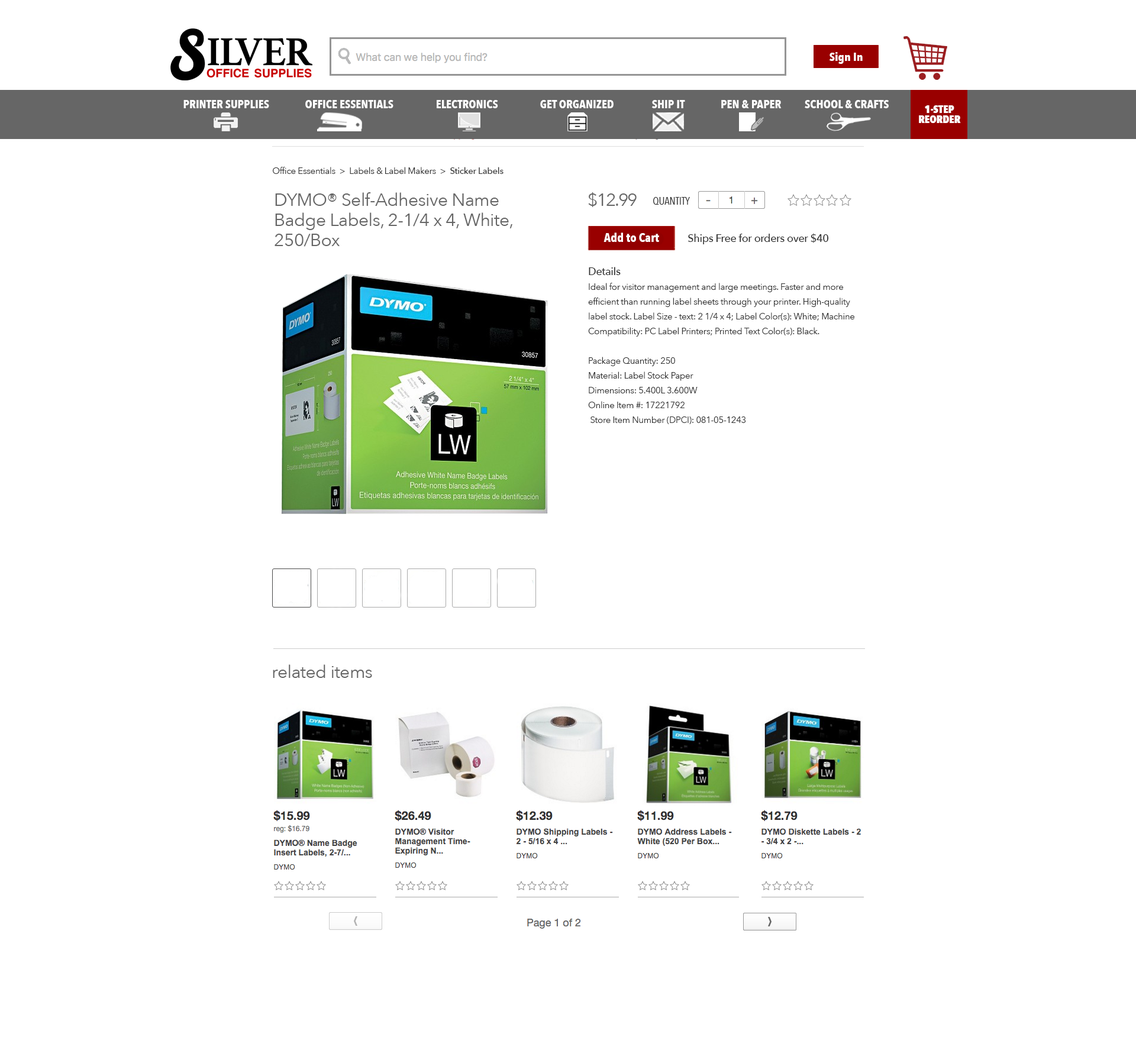
<style>
.page{position:relative;width:1136px;height:1050px;background:#ffffff}
.page>*{position:absolute;margin:0}
.t1{font:11.8px "AvenirNextCondensed-Bold";color:#ffffff}
.t2{font:10.6px/10.1px "AvenirNextCondensed-Heavy";color:#ffffff}
.t3{font:8.9px "AvenirNext-Regular";letter-spacing:-0.02em;color:#333333}
.t4{font:8.9px "AvenirNext-Medium";letter-spacing:-0.02em;color:#333333}
.t5{font:17.7px/20.1px "AvenirNext-Regular";letter-spacing:-0.02em;color:#666666}
.t6{font:17.7px "AvenirNext-Regular";letter-spacing:-0.06em;color:#666666}
.t7{font:17.7px "AvenirNext-Regular";letter-spacing:-0.08em;color:#666666}
.t8{font:17.7px "AvenirNext-Regular";letter-spacing:-0.02em;color:#666666}
.t9{font:10.6px "AvenirNextCondensed-Regular";color:#333333}
.t10{font:12.5px "AvenirNextCondensed-Bold";color:#ffffff}
.t11{font:10.6px "AvenirNext-Medium";letter-spacing:-0.02em;color:#333333}
.t12{font:8.9px/14.8px "AvenirNext-Regular";letter-spacing:-0.02em;color:#333333}
.t13{font:10.6px/14.8px "AvenirNext-Medium";letter-spacing:-0.02em;color:#333333}
</style>
<div class="page">
<p class="t1" style="left:829px;top:52px;width:33px;height:12px">Sign In</p>
<p class="t1" style="left:183px;top:100px;width:86px;height:8px">PRINTER SUPPLIES</p>
<p class="t1" style="left:305px;top:100px;width:88px;height:8px">OFFICE ESSENTIALS</p>
<p class="t1" style="left:437px;top:100px;width:61px;height:8px">ELECTRONICS</p>
<p class="t1" style="left:540px;top:100px;width:73px;height:8px">GET ORGANIZED</p>
<p class="t1" style="left:651px;top:100px;width:34px;height:8px">SHIP IT</p>
<p class="t1" style="left:721px;top:100px;width:60px;height:8px">PEN &amp; PAPER</p>
<p class="t1" style="left:804px;top:100px;width:84px;height:8px">SCHOOL &amp; CRAFTS</p>
<p class="t2" style="left:919px;top:105px;width:42px;height:18px;text-align:center">1-STEP<br>REORDER</p>
<p class="t3" style="left:273px;top:167px;width:230px;height:7px">Office Essentials  &gt;  Labels &amp; Label Makers  &gt;  <span class="t4">Sticker Labels</span></p>
<p class="t5" style="left:274px;top:192px;width:238px;height:55px">DYMO® Self-Adhesive Name Badge Labels, 2-1/4 x 4, White, 250/Box</p>
<p class="t6" style="left:588px;top:192px;width:48px;height:15px">$1<span class="t7">2</span>.<span class="t7">9</span><span class="t8">9</span></p>
<p class="t9" style="left:653px;top:197px;width:37px;height:8px">QUANTITY</p>
<p class="t10" style="left:603px;top:232px;width:56px;height:10px">Add to Cart</p>
<p class="t11" style="left:687px;top:233px;width:142px;height:11px">Ships Free for orders over $40</p>
<p class="t12" style="left:588px;top:267px;width:267px;height:157px"><span class="t13">Details<br></span>Ideal for visitor management and large meetings. Faster and more efficient than running label sheets through your printer. High-quality label stock. Label Size - text: 2 1/4 x 4; Label Color(s): White; Machine Compatibility: PC Label Printers; Printed Text Color(s): Black.<br><br>Package Quantity: 250<br>Material: Label Stock Paper<br>Dimensions: 5.400L 3.600W<br>Online Item #: 17221792<br> Store Item Number (DPCI): 081-05-1243</p>
<p class="t8" style="left:273px;top:664px;width:99px;height:14px">related items</p>
</div>
